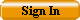
<style>
.page{position:relative;width:80px;height:20px;background:#ed9802}
.page>*{position:absolute;margin:0}
.t1{font:12px "TimesNewRomanPS-BoldMT";color:#101010}
</style>
<div class="page">
<p class="t1" style="left:22px;top:6px;width:38px;height:12px">Sign In</p>
</div>
